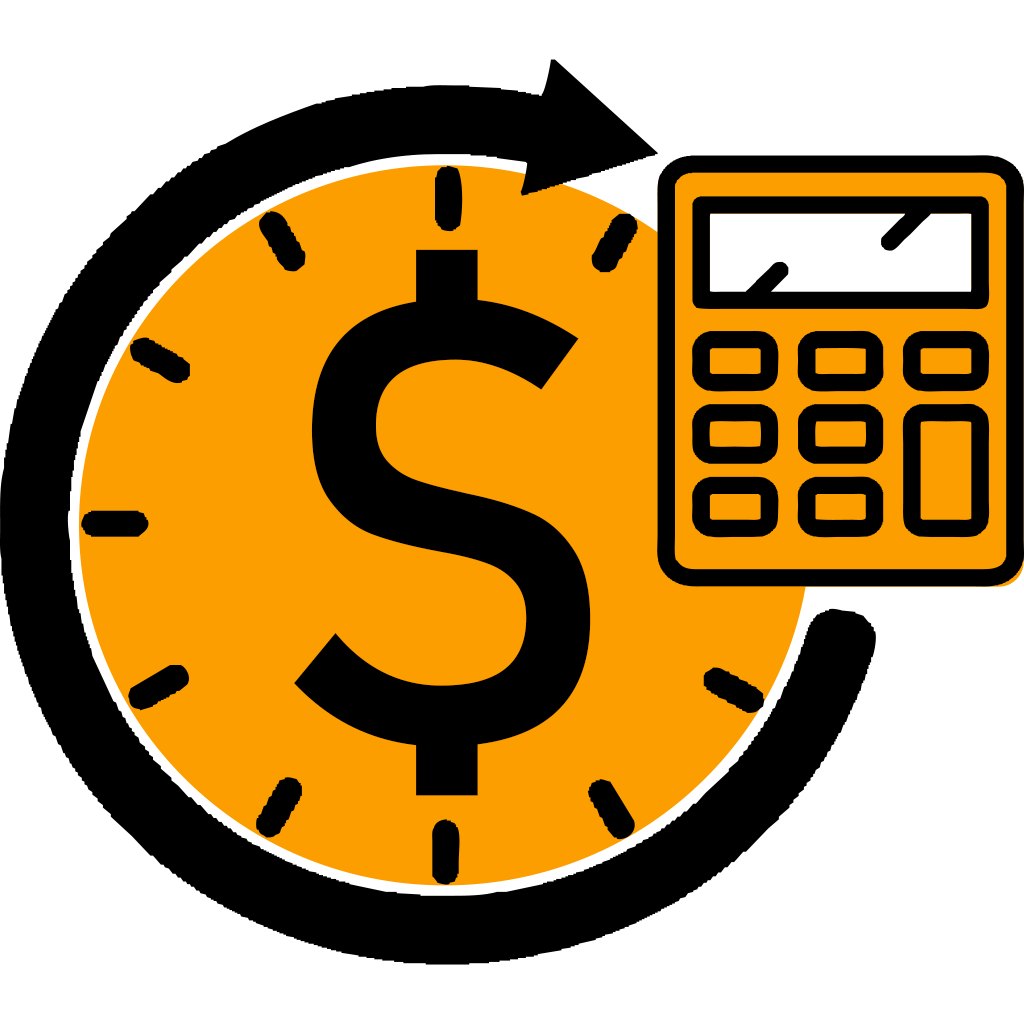
<style>
.page{position:relative;width:1024px;height:1024px;background:#ffffff}
.page>*{position:absolute;margin:0}
.t1{font:617.5px "Bahnschrift";color:#000000}
</style>
<div class="page">
<p class="t1" style="left:294px;top:249px;width:297px;height:547px">$</p>
</div>
